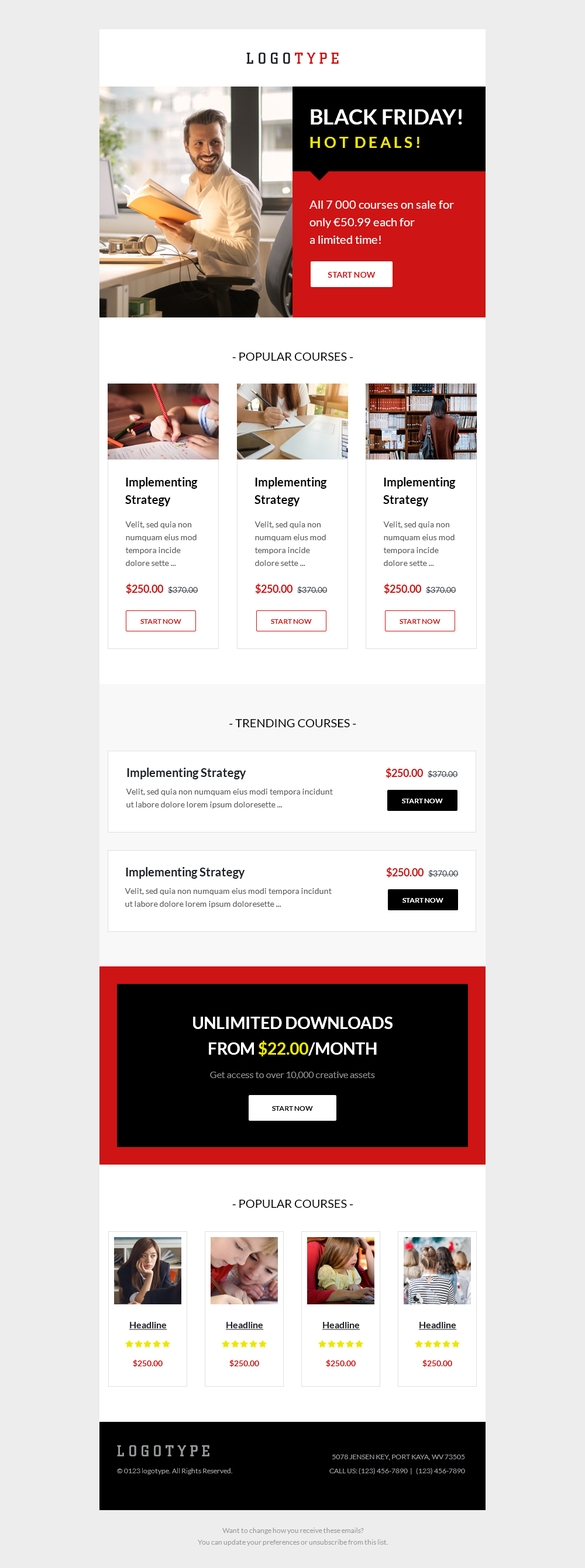
<style>
.page{position:relative;width:585px;height:1568px;background:#ededed}
.page>*{position:absolute;margin:0}
.t1{font:15.2px "City-Medium";color:#1d2025;text-transform:uppercase}
.t2{font:15.2px "City-Medium";color:#ce1414;text-transform:uppercase}
.t3{font:15.2px/23.4px "Lato-Bold";color:#ece600;text-transform:uppercase}
.t4{font:21px/23.4px "Lato-Bold";color:#ffffff;text-transform:uppercase}
.t5{font:11.7px/17.5px "Lato-Regular";color:#fefeff}
.t6{font:8.2px "Lato-Bold";color:#ce1414;text-transform:uppercase}
.t7{font:11.7px "Lato-Regular";color:#000000;text-transform:uppercase}
.t8{font:11.7px/17.5px "Lato-Bold";color:#000000}
.t9{font:8.2px/12.9px "Lato-Regular";color:#565656}
.t10{font:10.5px "Lato-Bold";color:#ce1414;text-transform:uppercase}
.t11{font:8.2px "Lato-Regular";color:#313941;text-transform:uppercase}
.t12{font:7px "Lato-Bold";color:#ce1414;text-transform:uppercase}
.t13{font:11.7px "Lato-Bold";color:#1d2025}
.t14{font:7px "Lato-Bold";color:#ffffff;text-transform:uppercase}
.t15{font:16.4px/25.7px "Lato-Bold";color:#ffffff;text-transform:uppercase}
.t16{font:16.4px/25.7px "Lato-Bold";color:#ece600;text-transform:uppercase}
.t17{font:9.4px "Lato-Regular";color:#8c8c8c}
.t18{font:7px "Lato-Bold";color:#000000;text-transform:uppercase}
.t19{font:9.4px "Lato-Bold";color:#1d2025;text-decoration:underline}
.t20{font:15.2px "City-Medium";color:#97999b;text-transform:uppercase}
.t21{font:7px/14px "Lato-Regular";color:#97999b;text-transform:uppercase}
.t22{font:7px "Lato-Regular";color:#97999b}
.t23{font:7px/11.7px "Lato-Regular";color:#97999b}
</style>
<div class="page">
<p class="t1" style="left:246px;top:53px;width:93px;height:11px">L o g o <span class="t2">t y p e</span></p>
<p class="t3" style="left:310px;top:109px;width:152px;height:39px"><span class="t4">black friday!<br></span>h o t  d e a l s !</p>
<p class="t5" style="left:309px;top:201px;width:145px;height:43px">All 7 000 courses on sale for only €50.99 each for <br>a limited time!</p>
<p class="t6" style="left:327px;top:272px;width:48px;height:6px">start now</p>
<p class="t7" style="left:232px;top:353px;width:121px;height:8px">- Popular Courses -</p>
<p class="t8" style="left:125px;top:477px;width:73px;height:29px">Implementing <br>Strategy</p>
<p class="t8" style="left:254px;top:477px;width:73px;height:29px">Implementing <br>Strategy</p>
<p class="t8" style="left:383px;top:477px;width:72px;height:29px">Implementing <br>Strategy</p>
<p class="t9" style="left:125px;top:521px;width:71px;height:45px">Velit, sed quia non numquam eius mod tempora incide dolore sette ...</p>
<p class="t9" style="left:254px;top:521px;width:72px;height:45px">Velit, sed quia non numquam eius mod tempora incide dolore sette ...</p>
<p class="t9" style="left:383px;top:521px;width:71px;height:45px">Velit, sed quia non numquam eius mod tempora incide dolore sette ...</p>
<p class="t10" style="left:126px;top:583px;width:72px;height:11px">$250.00  <span class="t11">$370.00</span></p>
<p class="t10" style="left:255px;top:583px;width:72px;height:11px">$250.00  <span class="t11">$370.00</span></p>
<p class="t10" style="left:384px;top:583px;width:72px;height:11px">$250.00  <span class="t11">$370.00</span></p>
<p class="t12" style="left:140px;top:619px;width:41px;height:5px">start now</p>
<p class="t12" style="left:271px;top:619px;width:41px;height:5px">start now</p>
<p class="t12" style="left:399px;top:619px;width:41px;height:5px">start now</p>
<p class="t7" style="left:229px;top:719px;width:127px;height:8px">- Trending Courses -</p>
<p class="t13" style="left:127px;top:768px;width:119px;height:11px">Implementing Strategy</p>
<p class="t10" style="left:385px;top:768px;width:73px;height:10px">$250.00  <span class="t11">$370.00</span></p>
<p class="t9" style="left:126px;top:789px;width:207px;height:20px">Velit, sed quia non numquam eius modi tempora incidunt ut labore dolore lorem ipsum doloresette ...</p>
<p class="t14" style="left:402px;top:799px;width:41px;height:4px">start now</p>
<p class="t13" style="left:126px;top:867px;width:119px;height:12px">Implementing Strategy</p>
<p class="t10" style="left:386px;top:867px;width:72px;height:11px">$250.00  <span class="t11">$370.00</span></p>
<p class="t9" style="left:125px;top:888px;width:206px;height:20px">Velit, sed quia non numquam eius modi tempora incidunt ut labore dolore lorem ipsum doloresette ...</p>
<p class="t14" style="left:402px;top:898px;width:41px;height:5px">start now</p>
<p class="t15" style="left:193px;top:1017px;width:199px;height:39px;text-align:center">Unlimited Downloads<br>From <span class="t16">$22.00</span>/month</p>
<p class="t17" style="left:210px;top:1072px;width:165px;height:7px">Get access to over 10,000 creative assets</p>
<p class="t18" style="left:272px;top:1106px;width:41px;height:5px">start now</p>
<p class="t7" style="left:232px;top:1200px;width:121px;height:8px">- Popular Courses -</p>
<p class="t19" style="left:129px;top:1322px;width:38px;height:8px">Headline</p>
<p class="t19" style="left:226px;top:1322px;width:38px;height:8px">Headline</p>
<p class="t19" style="left:322px;top:1322px;width:38px;height:8px">Headline</p>
<p class="t19" style="left:419px;top:1322px;width:38px;height:8px">Headline</p>
<p class="t6" style="left:133px;top:1359px;width:30px;height:8px">$250.00</p>
<p class="t6" style="left:229px;top:1359px;width:30px;height:8px">$250.00</p>
<p class="t6" style="left:326px;top:1359px;width:29px;height:8px">$250.00</p>
<p class="t6" style="left:422px;top:1359px;width:30px;height:8px">$250.00</p>
<p class="t20" style="left:117px;top:1445px;width:92px;height:11px">L o g o t y p e</p>
<p class="t21" style="left:329px;top:1455px;width:136px;height:19px;text-align:right">5078 Jensen Key, Port Kaya, WV 73505<br>Call Us: (123) 456-7890  |   (123) 456-7890</p>
<p class="t22" style="left:117px;top:1468px;width:115px;height:6px">© 0123 logotype. All Rights Reserved.</p>
<p class="t23" style="left:198px;top:1528px;width:190px;height:18px;text-align:center">Want to change how you receive these emails? <br>You can update your preferences or unsubscribe from this list.</p>
</div>
